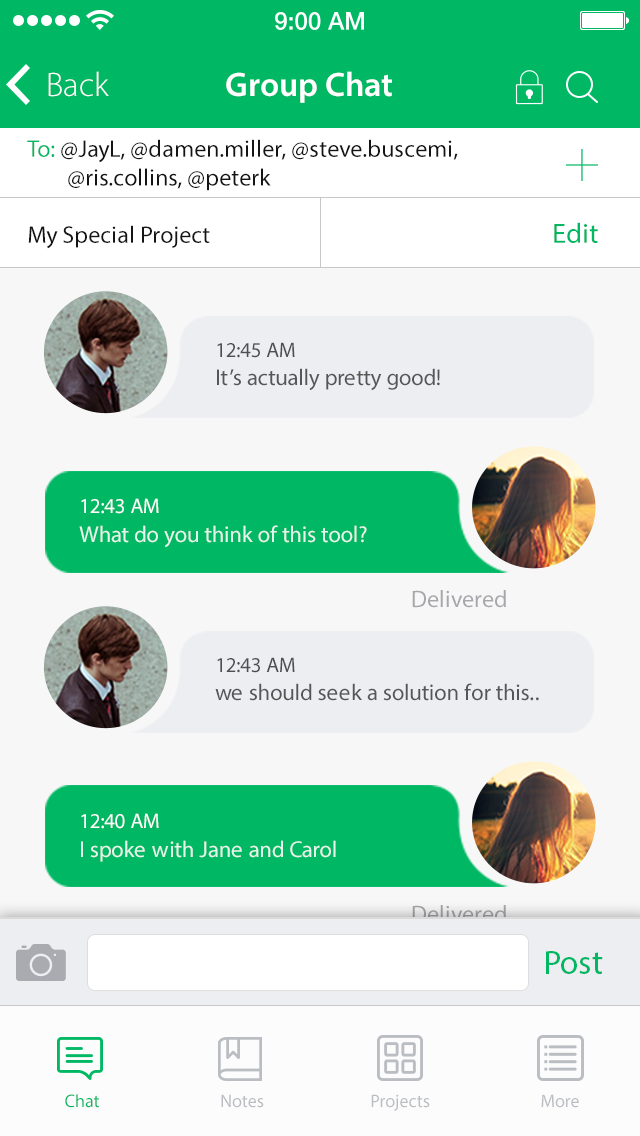
<style>
.page{position:relative;width:640px;height:1136px;background:#f7f7f7}
.page>*{position:absolute;margin:0}
.t1{font:34px "MyriadPro-Light";color:#fefefe}
.t2{font:34px "MyriadPro-Semibold";color:#ffffff}
.t3{font:24px "MyriadPro-Regular";color:#141414}
.t4{font:24px "MyriadPro-Regular";color:#00b863}
.t5{font:28px "MyriadPro-Regular";color:#00b863}
.t6{font:21.2px "MyriadPro-Regular";color:#4f4f4f}
.t7{font:22.9px "MyriadPro-Regular";color:#565657}
.t8{font:17.6px "HelveticaNeue-Medium";color:#565657}
.t9{font:21.2px "MyriadPro-Regular";color:#ffffff}
.t10{font:22.9px "MyriadPro-Regular";color:#e6f5ec}
.t11{font:17.6px "HelveticaNeue-Medium";color:#e6f5ec}
.t12{font:24px "MyriadPro-Regular";color:#a7a6ab}
.t13{font:24px "MyriadPro-Regular"}
.t14{font:34px "MyriadPro-Regular";color:#00b863}
.t15{font:18px "MyriadPro-Regular";color:#00b863}
.t16{font:18px "MyriadPro-Regular";color:#babdc2}
</style>
<div class="page">
<p class="t1" style="left:48px;top:71px;width:61px;height:26px">Back</p>
<p class="t2" style="left:226px;top:71px;width:166px;height:32px">Group Chat</p>
<p class="t3" style="left:27px;top:139px;width:431px;height:52px"><span class="t4">To: </span>@JayL, @damen.miller, @steve.buscemi,<br>        @ris.collins, @peterk</p>
<p class="t5" style="left:554px;top:222px;width:44px;height:21px">Edit</p>
<p class="t3" style="left:28px;top:225px;width:182px;height:24px">My Special Project</p>
<p class="t6" style="left:217px;top:342px;width:78px;height:16px">12:45 AM</p>
<p class="t7" style="left:217px;top:368px;width:223px;height:23px"><span class="t8"><br></span>It’s actually pretty good!</p>
<p class="t9" style="left:81px;top:498px;width:78px;height:16px">12:43 AM</p>
<p class="t10" style="left:79px;top:525px;width:288px;height:23px"><span class="t11"><br></span>What do you think of this tool?</p>
<p class="t12" style="left:412px;top:590px;width:94px;height:18px">Delivered</p>
<p class="t6" style="left:217px;top:657px;width:78px;height:16px">12:43 AM</p>
<p class="t7" style="left:215px;top:683px;width:324px;height:18px"><span class="t8"><br></span>we should seek a solution for this..</p>
<p class="t9" style="left:81px;top:813px;width:78px;height:16px">12:40 AM</p>
<p class="t10" style="left:81px;top:840px;width:255px;height:22px"><span class="t11"><br></span>I spoke with Jane and Carol</p>
<p class="t13" style="left:412px;top:905px;width:94px;height:18px">Delivered</p>
<p class="t14" style="left:546px;top:951px;width:57px;height:23px">Post</p>
<p class="t15" style="left:65px;top:1094px;width:34px;height:14px">Chat</p>
<p class="t16" style="left:221px;top:1094px;width:43px;height:14px">Notes</p>
<p class="t16" style="left:371px;top:1094px;width:59px;height:17px">Projects</p>
<p class="t16" style="left:541px;top:1094px;width:38px;height:14px">More</p>
</div>
